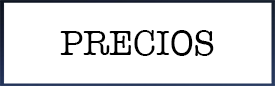
<style>
.page{position:relative;width:275px;height:86px;background:#ffffff}
.page>*{position:absolute;margin:0}
.t1{font:36px "AmericanTypewriter";color:#000000}
</style>
<div class="page">
<p class="t1" style="left:60px;top:30px;width:154px;height:26px">PRECIOS</p>
</div>
